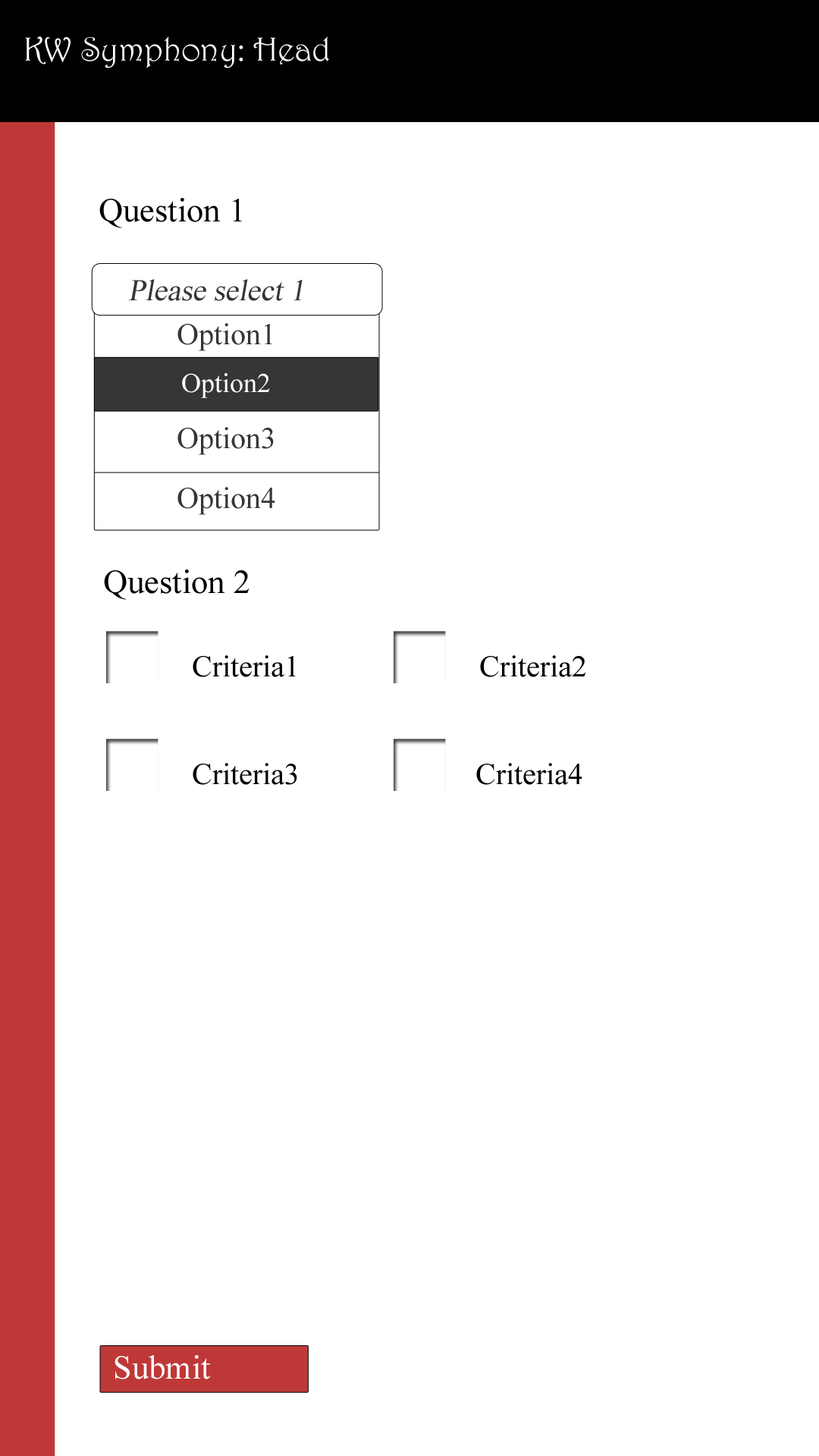
<style>
.page{position:relative;width:819px;height:1456px;background:#ffffff}
.page>*{position:absolute;margin:0}
.t1{font:33.7px "Harrington";color:#ffffff}
.t2{font:33.7px "TimesNewRomanPSMT";color:#000000}
.t3{font:30.3px "TimesNewRomanPSMT";color:#363636;font-style:italic}
.t4{font:30.3px "TimesNewRomanPSMT";color:#363636}
.t5{font:27.3px "TimesNewRomanPSMT";color:#ffffff}
.t6{font:30.3px "TimesNewRomanPSMT";color:#000000}
.t7{font:33.7px "TimesNewRomanPSMT";color:#ffffff}
</style>
<div class="page">
<p class="t1" style="left:25px;top:36px;width:304px;height:32px">KW Symphony: Head</p>
<p class="t2" style="left:99px;top:198px;width:143px;height:30px">Question 1</p>
<p class="t3" style="left:128px;top:279px;width:175px;height:22px">Please select 1</p>
<p class="t4" style="left:177px;top:323px;width:95px;height:28px">Option1</p>
<p class="t5" style="left:182px;top:373px;width:88px;height:25px">Option2</p>
<p class="t4" style="left:177px;top:427px;width:97px;height:28px">Option3</p>
<p class="t4" style="left:177px;top:487px;width:98px;height:28px">Option4</p>
<p class="t2" style="left:104px;top:570px;width:145px;height:30px">Question 2</p>
<p class="t6" style="left:193px;top:655px;width:103px;height:22px">Criteria1</p>
<p class="t6" style="left:480px;top:655px;width:106px;height:22px">Criteria2</p>
<p class="t6" style="left:193px;top:763px;width:104px;height:22px">Criteria3</p>
<p class="t6" style="left:476px;top:763px;width:106px;height:22px">Criteria4</p>
<p class="t7" style="left:115px;top:1355px;width:96px;height:24px">Submit</p>
</div>
